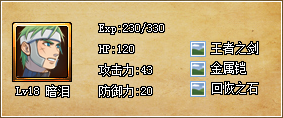
<style>
.page{position:relative;width:283px;height:118px}
.page>*{position:absolute;margin:0}
.t1{font:12px "SimSun";color:#ffffff}
</style>
<div class="page">
<p class="t1" style="left:99px;top:23px;width:65px;height:74px">Exp:230/330<br>HP:120<br>攻击力:43<br>防御力:20</p>
<p class="t1" style="left:211px;top:42px;width:47px;height:12px">王者之剑</p>
<p class="t1" style="left:211px;top:62px;width:35px;height:12px">金属铠</p>
<p class="t1" style="left:16px;top:85px;width:53px;height:12px">Lv18 暗泪</p>
<p class="t1" style="left:212px;top:82px;width:46px;height:12px">回恢之石</p>
</div>
